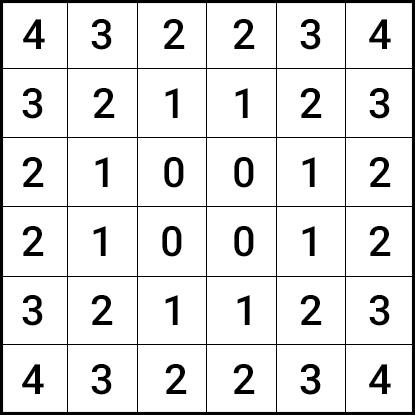
<style>
.page{position:relative;width:415px;height:415px;background:#ffffff}
.page>*{position:absolute;margin:0}
.t1{font:41.7px "Roboto-Medium";color:#000000}
</style>
<div class="page">
<p class="t1" style="left:23px;top:19px;width:22px;height:30px">4</p>
<p class="t1" style="left:91px;top:19px;width:21px;height:31px">3</p>
<p class="t1" style="left:163px;top:19px;width:22px;height:30px">2</p>
<p class="t1" style="left:233px;top:19px;width:22px;height:30px">2</p>
<p class="t1" style="left:300px;top:19px;width:21px;height:31px">3</p>
<p class="t1" style="left:369px;top:19px;width:22px;height:30px">4</p>
<p class="t1" style="left:22px;top:88px;width:21px;height:31px">3</p>
<p class="t1" style="left:93px;top:88px;width:22px;height:30px">2</p>
<p class="t1" style="left:165px;top:88px;width:13px;height:30px">1</p>
<p class="t1" style="left:235px;top:88px;width:13px;height:30px">1</p>
<p class="t1" style="left:300px;top:88px;width:22px;height:30px">2</p>
<p class="t1" style="left:369px;top:88px;width:21px;height:31px">3</p>
<p class="t1" style="left:22px;top:157px;width:22px;height:30px">2</p>
<p class="t1" style="left:95px;top:157px;width:13px;height:30px">1</p>
<p class="t1" style="left:164px;top:157px;width:20px;height:31px">0</p>
<p class="t1" style="left:234px;top:157px;width:20px;height:31px">0</p>
<p class="t1" style="left:302px;top:157px;width:13px;height:30px">1</p>
<p class="t1" style="left:369px;top:157px;width:22px;height:30px">2</p>
<p class="t1" style="left:22px;top:226px;width:22px;height:30px">2</p>
<p class="t1" style="left:93px;top:226px;width:13px;height:30px">1</p>
<p class="t1" style="left:162px;top:226px;width:20px;height:31px">0</p>
<p class="t1" style="left:234px;top:226px;width:20px;height:31px">0</p>
<p class="t1" style="left:302px;top:226px;width:13px;height:30px">1</p>
<p class="t1" style="left:369px;top:226px;width:22px;height:30px">2</p>
<p class="t1" style="left:22px;top:295px;width:21px;height:31px">3</p>
<p class="t1" style="left:91px;top:295px;width:22px;height:30px">2</p>
<p class="t1" style="left:165px;top:295px;width:13px;height:30px">1</p>
<p class="t1" style="left:237px;top:295px;width:13px;height:30px">1</p>
<p class="t1" style="left:300px;top:295px;width:22px;height:30px">2</p>
<p class="t1" style="left:369px;top:295px;width:21px;height:31px">3</p>
<p class="t1" style="left:22px;top:364px;width:22px;height:30px">4</p>
<p class="t1" style="left:91px;top:364px;width:21px;height:31px">3</p>
<p class="t1" style="left:165px;top:364px;width:22px;height:30px">2</p>
<p class="t1" style="left:233px;top:364px;width:22px;height:30px">2</p>
<p class="t1" style="left:369px;top:364px;width:22px;height:30px">4</p>
</div>
